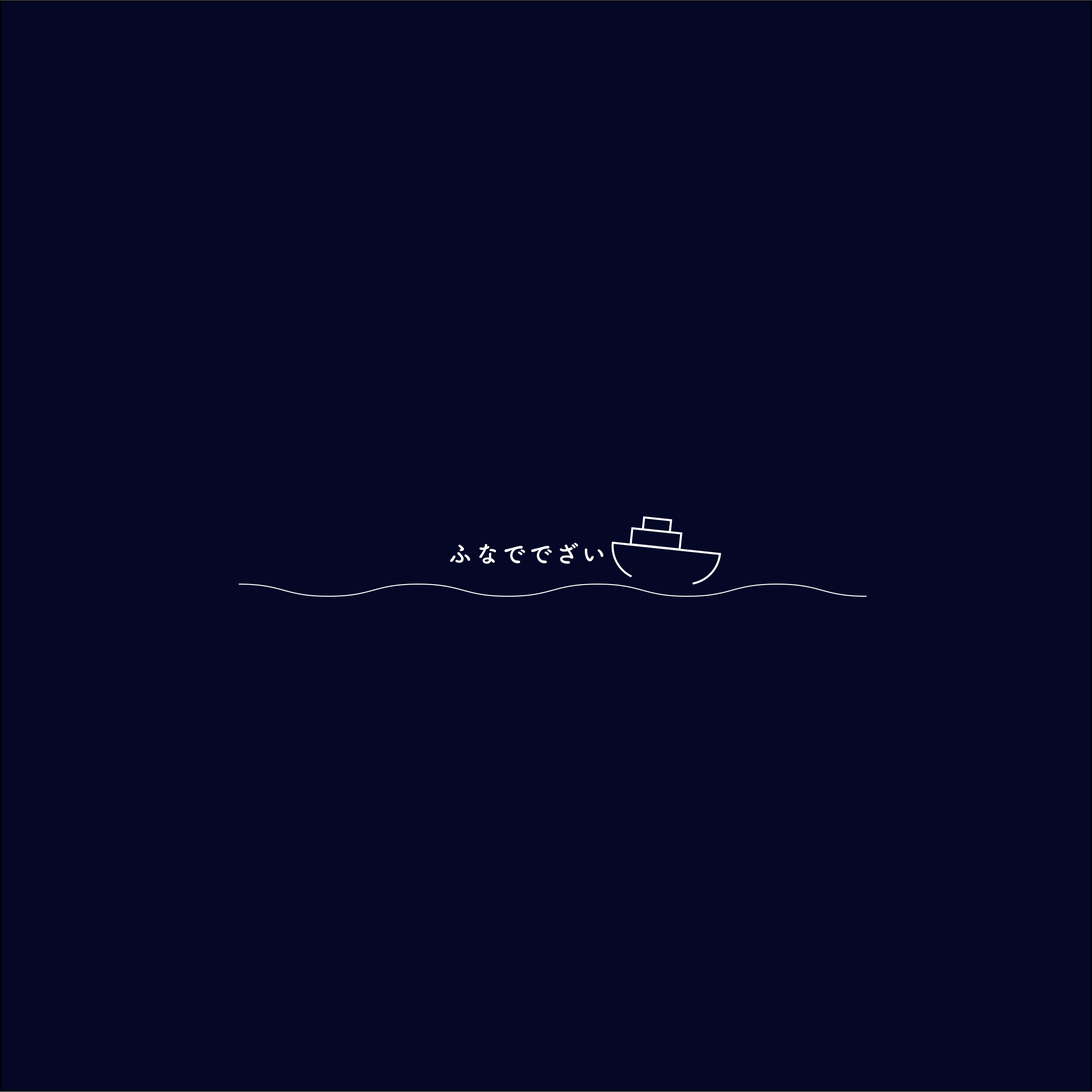
<style>
.page{position:relative;width:1092px;height:1092px;background:#040826}
.page>*{position:absolute;margin:0}
.t1{font:24.3px "TsukuARdGothicStd-B";letter-spacing:0.1em;color:#ffffff}
</style>
<div class="page">
<p class="t1" style="left:450px;top:543px;width:153px;height:21px">ふなででざい</p>
</div>
